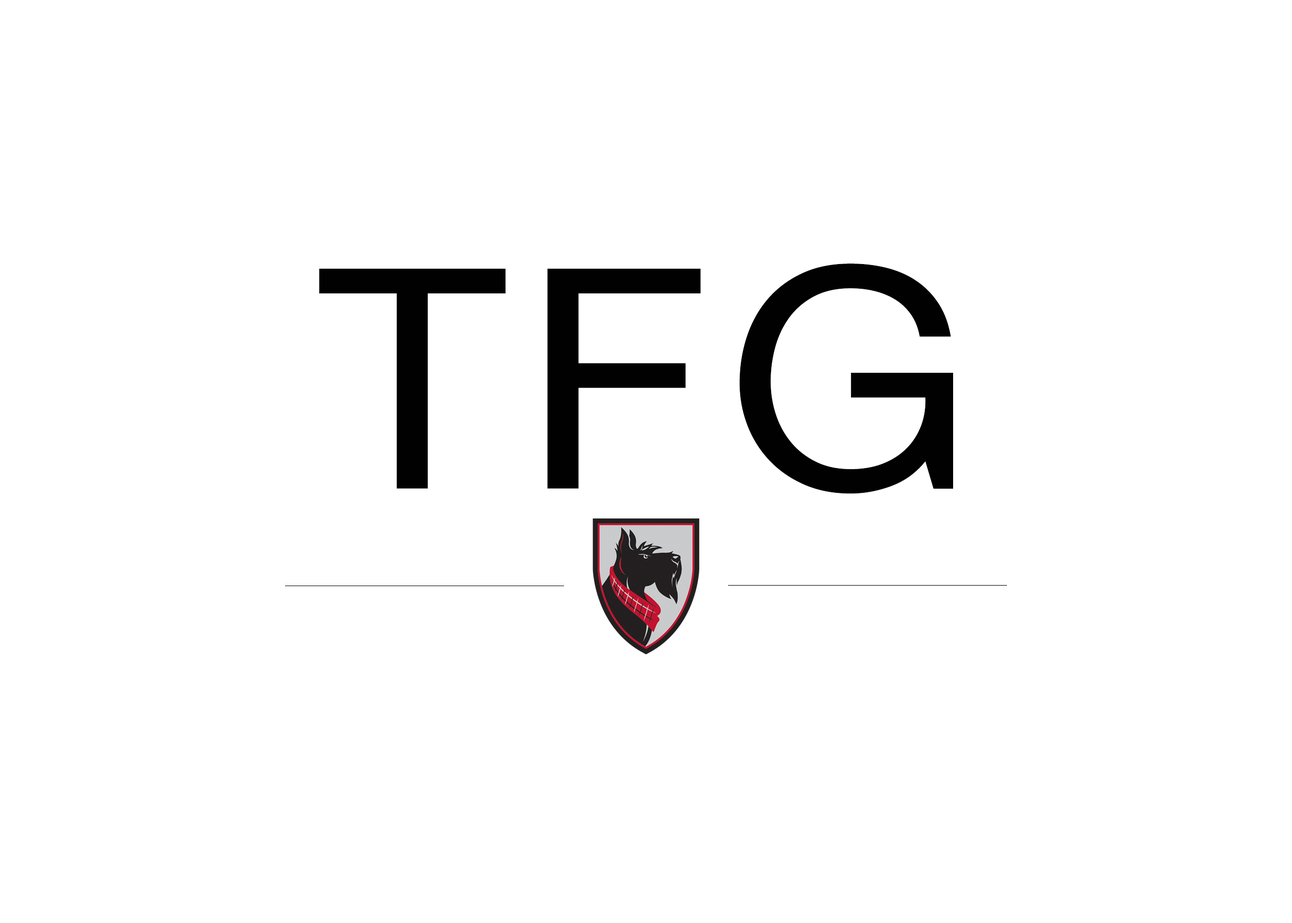
<style>
.page{position:relative;width:1292px;height:923px;background:#ffffff}
.page>*{position:absolute;margin:0}
.t1{font:307.6px "HelveticaNeue";letter-spacing:0.05em;color:#010101;scale:1.06 1}
</style>
<div class="page">
<p class="t1" style="left:319px;top:264px;width:634px;height:230px">TFG</p>
</div>
